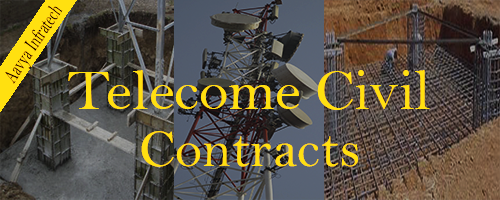
<style>
.page{position:relative;width:500px;height:200px}
.page>*{position:absolute;margin:0}
.t1{font:58.2px "BellMT";color:#ffe010}
.t2{font:53.6px "BellMT";color:#ffe010}
</style>
<div class="page">
<p class="t1" style="left:68px;top:70px;width:362px;height:40px">Telecome Civil</p>
<p class="t2" style="left:141px;top:131px;width:217px;height:36px">Contracts</p>
</div>
